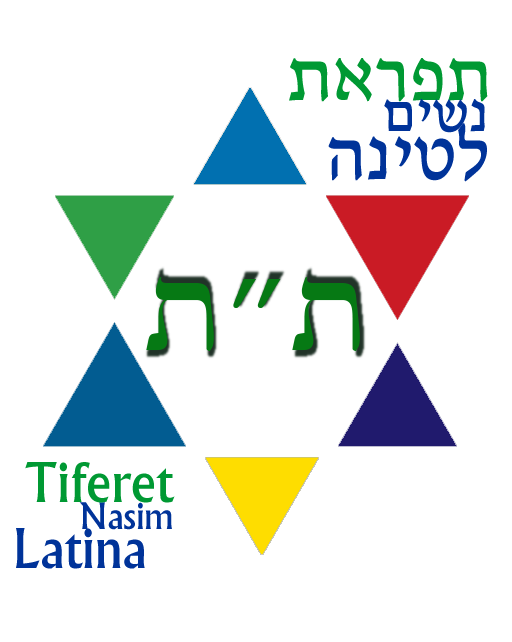
<style>
.page{position:relative;width:512px;height:642px;background:#ffffff}
.page>*{position:absolute;margin:0}
.t1{font:77.6px "Narkisim";color:#009933}
.t2{font:58.2px "Narkisim";color:#003399}
.t3{font:77.6px "Narkisim";color:#003399}
.t4{font:58.2px "Narkisim";color:#009933}
.t5{font:38.8px "Narkisim";color:#003399}
</style>
<div class="page">
<p class="t1" style="left:289px;top:58px;width:199px;height:44px">תארפת</p>
<p class="t2" style="left:384px;top:99px;width:101px;height:34px">םישנ</p>
<p class="t3" style="left:328px;top:123px;width:159px;height:59px">הניטל</p>
<p class="t4" style="left:25px;top:462px;width:150px;height:41px">Tiferet</p>
<p class="t5" style="left:79px;top:502px;width:93px;height:28px">Nasim</p>
<p class="t2" style="left:16px;top:528px;width:129px;height:41px">Latina</p>
</div>
